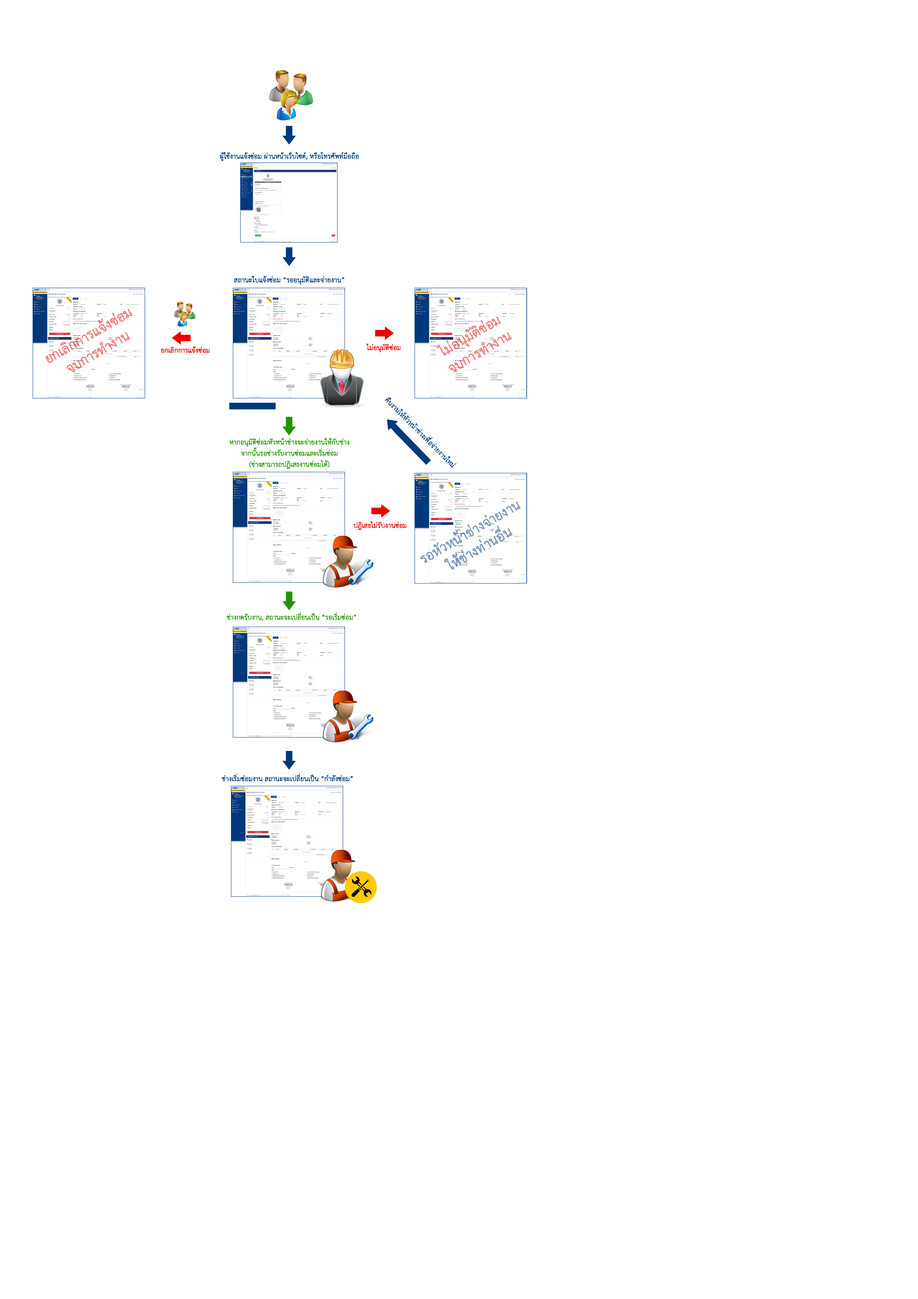
<style>
.page{position:relative;width:918px;height:1299px;background:#ffffff}
.page>*{position:absolute;margin:0}
.t1{font:9.5px "THSarabunPSK";letter-spacing:-0.015em;color:#00387c;font-weight:bold}
.t2{font:19.1px/19.1px "THSarabunPSK";letter-spacing:-0.015em;color:#f47a7a;font-weight:bold}
.t3{font:9.5px "THSarabunPSK";letter-spacing:-0.015em;color:#ea0000;font-weight:bold}
.t4{font:9.5px/11.1px "THSarabunPSK";letter-spacing:-0.015em;color:#239300;font-weight:bold}
.t5{font:19.1px/19.1px "THSarabunPSK";letter-spacing:-0.015em;color:#7a97bb;font-weight:bold}
.t6{font:9.5px "THSarabunPSK";letter-spacing:-0.015em;color:#239300;font-weight:bold}
</style>
<div class="page">
<p class="t1" style="left:220px;top:152px;width:139px;height:9px">ผู้ใช้งานแจ้งซ่อม ผ่านหน้าเว็บไซต์, หรือโทรศัพท์มือถือ</p>
<p class="t1" style="left:234px;top:276px;width:110px;height:9px">สถานะใบแจ้งซ่อม “รออนุมัติและจ่ายงาน”</p>
<p class="t2" style="left:46px;top:308px;width:87px;height:64px;text-align:center;rotate:-30deg">ยกเลิกการแจ้งซ่อม<br>จบการทำงาน</p>
<p class="t2" style="left:436px;top:316px;width:76px;height:56px;text-align:center;rotate:-30deg">ไม่อนุมัติซ่อม<br>จบการทำงาน</p>
<p class="t3" style="left:161px;top:346px;width:49px;height:7px">ยกเลิกการแจ้งซ่อม</p>
<p class="t3" style="left:366px;top:343px;width:35px;height:9px">ไม่อนุมัติซ่อม</p>
<p class="t1" style="left:385px;top:397px;width:71px;height:71px;rotate:45deg">คืนงานให้หัวหน้าช่างเพื่อจ่ายงานใหม่</p>
<p class="t4" style="left:230px;top:438px;width:119px;height:31px;text-align:center">หากอนุมัติซ่อมหัวหน้าช่างจะจ่ายงานให้กับช่าง<br>จากนั้นรอช่างรับงานซ่อมและเริ่มซ่อม<br>(ช่างสามารถปฎิเสธงานซ่อมได้)</p>
<p class="t5" style="left:420px;top:501px;width:101px;height:68px;text-align:center;rotate:-30deg">รอหัวหน้าช่างจ่ายงาน<br>ให้ช่างท่านอื่น</p>
<p class="t3" style="left:354px;top:521px;width:53px;height:9px">ปฎิเสธไม่รับงานซ่อม</p>
<p class="t6" style="left:227px;top:612px;width:129px;height:9px">ช่างกดรับงาน, สถานะจะเปลี่ยนเป็น “รอเริ่มซ่อม”</p>
<p class="t1" style="left:222px;top:773px;width:131px;height:8px">ช่างเริ่มซ่อมงาน สถานะจะเปลี่ยนเป็น “กำลังซ่อม”</p>
</div>
